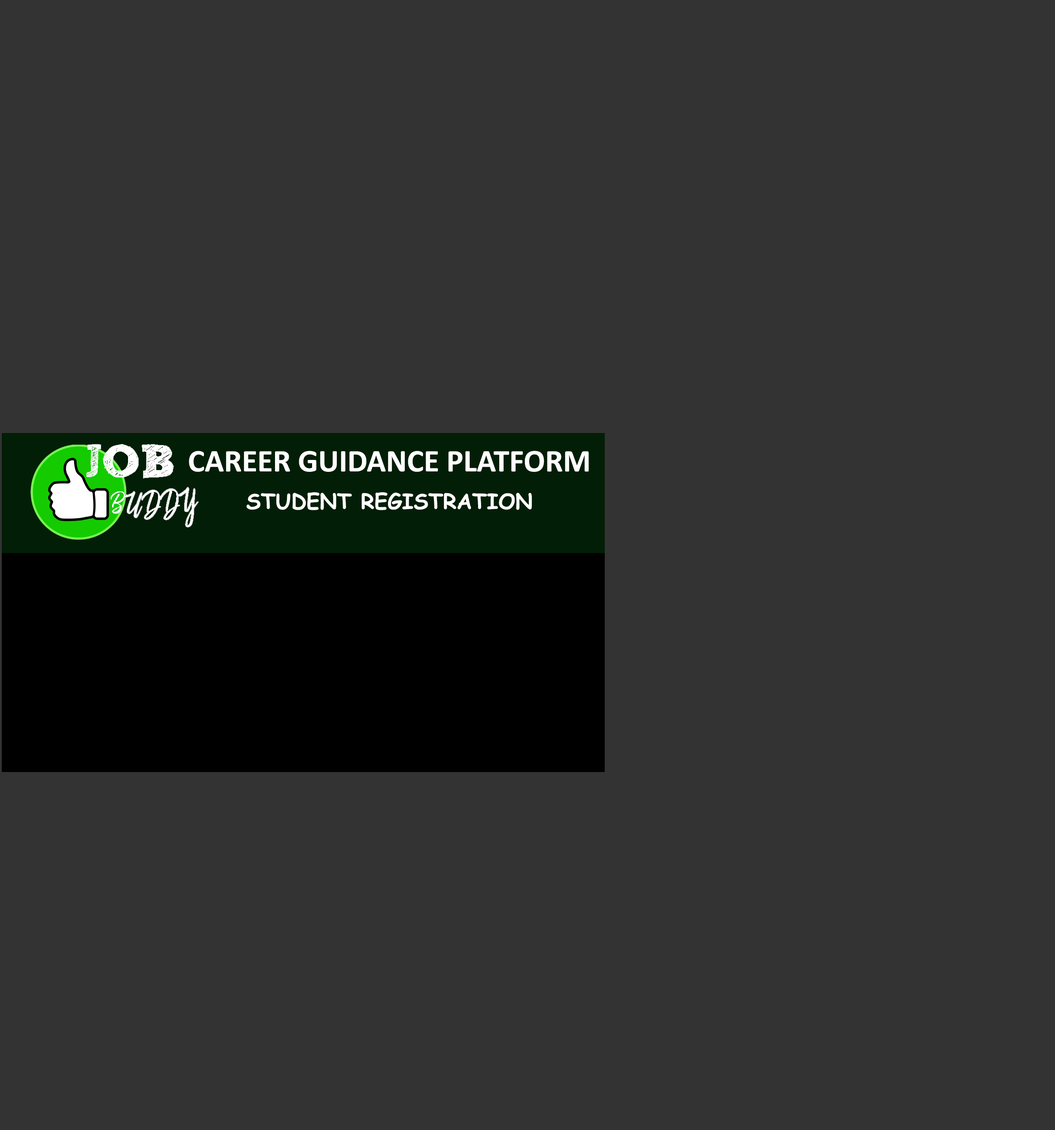
<style>
.page{position:relative;width:1055px;height:1130px;background:#333333}
.page>*{position:absolute;margin:0}
.t1{font:31.8px "Calibri-Bold";color:#ffffff;text-transform:uppercase}
.t2{font:21.2px "ComicSansMS-Bold";color:#ffffff;text-transform:uppercase}
</style>
<div class="page">
<p class="t1" style="left:189px;top:451px;width:400px;height:21px">Career guidance platform</p>
<p class="t2" style="left:246px;top:492px;width:286px;height:18px">student registration</p>
</div>
